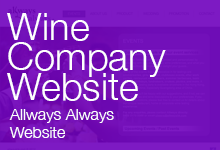
<style>
.page{position:relative;width:220px;height:150px}
.page>*{position:absolute;margin:0}
.t1{font:38px/30px "HelveticaNeue-Light";color:#ffffff}
.t2{font:16px/18px "HelveticaNeue-Light";color:#ffffff}
</style>
<div class="page">
<p class="t1" style="left:7px;top:13px;width:159px;height:88px">Wine<br>Company<br>Website</p>
<p class="t2" style="left:9px;top:109px;width:105px;height:29px">Allways Always <br>Website</p>
</div>
